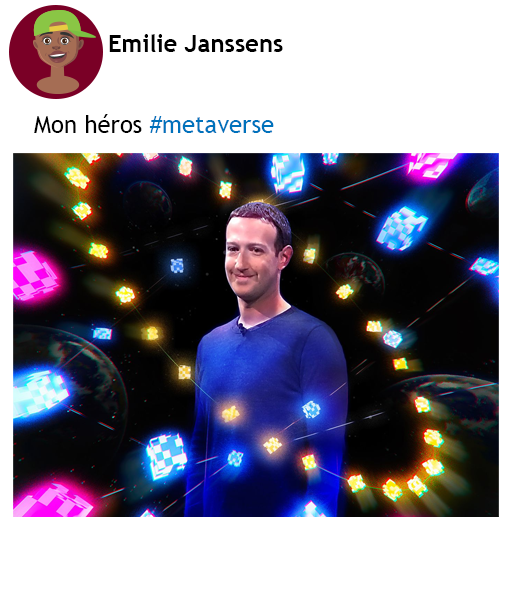
<style>
.page{position:relative;width:512px;height:616px;background:#ffffff}
.page>*{position:absolute;margin:0}
.t1{font:24px "TrebuchetMS-Bold";color:#000000}
.t2{font:24px "TrebuchetMS";color:#0072bc}
.t3{font:24px "TrebuchetMS";color:#000000}
</style>
<div class="page">
<p class="t1" style="left:109px;top:34px;width:174px;height:18px">Emilie Janssens</p>
<p class="t2" style="left:34px;top:114px;width:240px;height:19px"><span class="t3">Mon héros </span>#metaverse</p>
</div>
